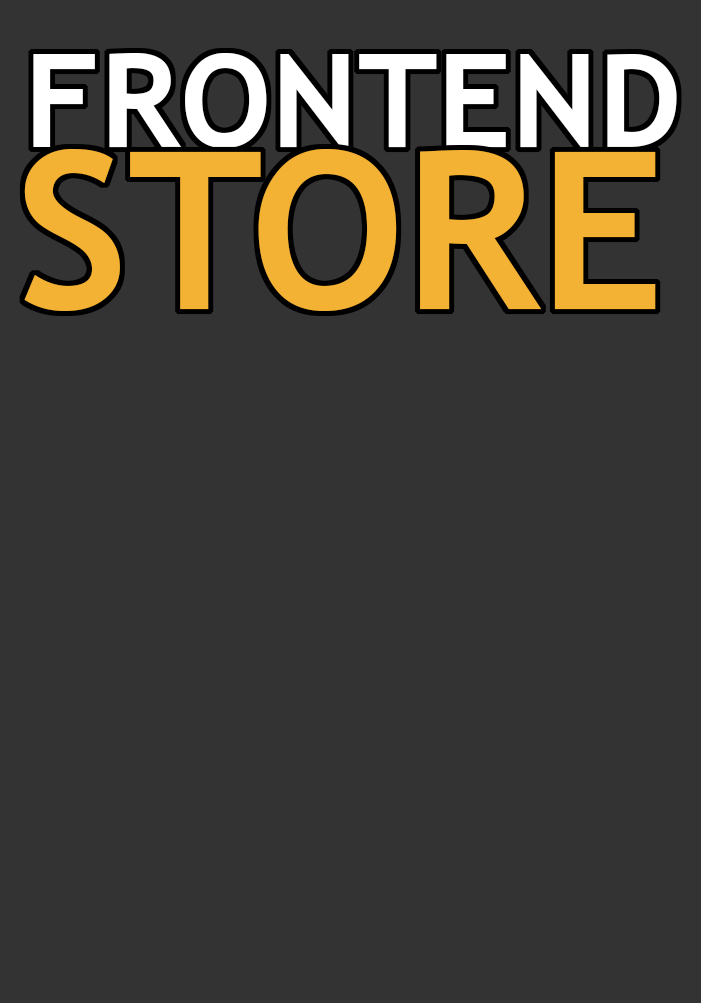
<style>
.page{position:relative;width:701px;height:1003px;background:#333333}
.page>*{position:absolute;margin:0}
.t1{font:130px "TrebuchetMS-Bold";color:#ffffff}
.t2{font:220px "TrebuchetMS-Bold";color:#f3b234}
</style>
<div class="page">
<p class="t1" style="left:33px;top:53px;width:644px;height:95px">FRONTEND</p>
<p class="t2" style="left:24px;top:148px;width:632px;height:163px">STORE</p>
</div>
